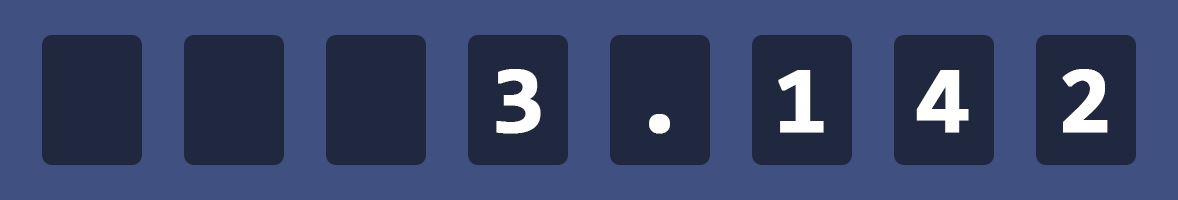
<style>
.page{position:relative;width:1178px;height:200px;background:#405080}
.page>*{position:absolute;margin:0}
.t1{font:96px "Consolas-Bold";letter-spacing:0.9em;color:#ffffff;font-weight:bold}
</style>
<div class="page">
<p class="t1" style="left:496px;top:69px;width:612px;height:65px">3.142</p>
</div>
